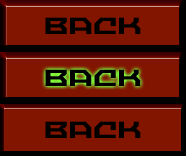
<style>
.page{position:relative;width:186px;height:156px;background:#811500}
.page>*{position:absolute;margin:0}
.t1{font:26px "NechaoSharpRegular";letter-spacing:0.005em;color:#000000}
</style>
<div class="page">
<p class="t1" style="left:45px;top:17px;width:96px;height:17px">Back</p>
<p class="t1" style="left:45px;top:69px;width:96px;height:17px">Back</p>
<p class="t1" style="left:45px;top:121px;width:96px;height:17px">Back</p>
</div>
